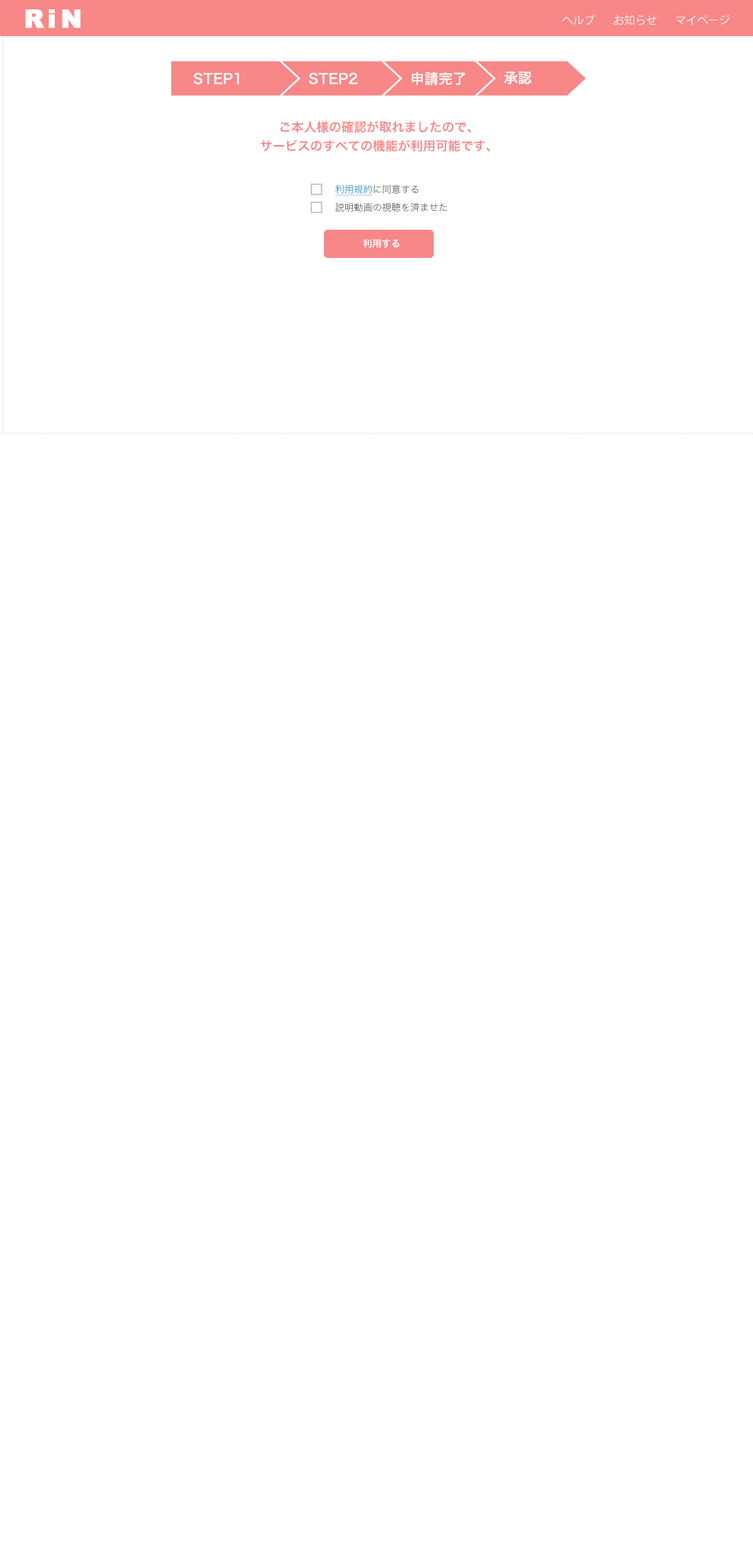
<style>
.page{position:relative;width:753px;height:1568px;background:#ffffff}
.page>*{position:absolute;margin:0}
.t1{font:25.2px "Arial-Black";letter-spacing:0.14em;color:#ffffff;font-weight:bold}
.t2{font:11px "KozGoPr6N-Regular";color:#ffffff}
.t3{font:14.1px "HiraKakuProN-W6";color:#ffffff}
.t4{font:12.5px/18.8px "HiraKakuProN-W6";color:#f88787}
.t5{font:9.4px "HiraKakuProN-W3";color:#595757}
.t6{font:9.4px "HiraKakuProN-W3";color:#0089bf;text-decoration:underline}
.t7{font:9.4px "HiraKakuProN-W6";color:#ffffff}
</style>
<div class="page">
<p class="t1" style="left:25px;top:9px;width:56px;height:19px">RiN</p>
<p class="t2" style="left:562px;top:14px;width:33px;height:11px">ヘルプ</p>
<p class="t2" style="left:613px;top:15px;width:43px;height:10px">お知らせ</p>
<p class="t2" style="left:675px;top:14px;width:55px;height:11px">マイページ</p>
<p class="t3" style="left:194px;top:72px;width:45px;height:13px">STEP1</p>
<p class="t3" style="left:309px;top:72px;width:49px;height:13px">STEP2</p>
<p class="t3" style="left:412px;top:71px;width:54px;height:14px">申請完了</p>
<p class="t3" style="left:503px;top:71px;width:29px;height:14px">承認</p>
<p class="t4" style="left:260px;top:121px;width:230px;height:31px;text-align:center">ご本人様の確認が取れましたので、<br>サービスのすべての機能が利用可能です、</p>
<p class="t5" style="left:334px;top:184px;width:85px;height:12px"><span class="t6">利用規約</span>に同意する</p>
<p class="t5" style="left:335px;top:202px;width:112px;height:10px">説明動画の視聴を済ませた</p>
<p class="t7" style="left:363px;top:239px;width:36px;height:9px">利用する</p>
</div>
